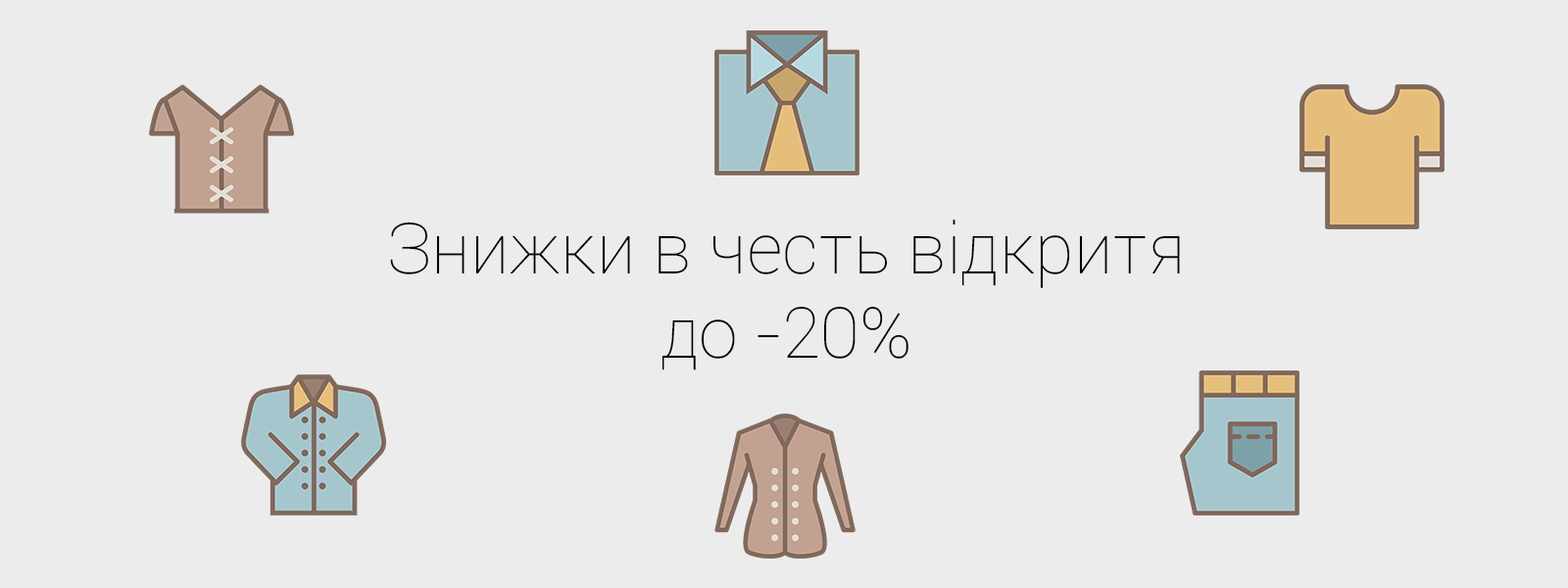
<style>
.page{position:relative;width:1568px;height:588px;background:#ececec}
.page>*{position:absolute;margin:0}
.t1{font:70.6px "Roboto-Thin";color:#000000}
</style>
<div class="page">
<p class="t1" style="left:390px;top:220px;width:790px;height:150px;text-align:center">Знижки в честь відкритя<br>до -20%</p>
</div>
